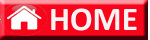
<style>
.page{position:relative;width:150px;height:40px;background:#f8051c}
.page>*{position:absolute;margin:0}
.t1{font:33.3px "Calibri-Bold";color:#f9f2f3}
</style>
<div class="page">
<p class="t1" style="left:51px;top:8px;width:86px;height:23px">HOME</p>
</div>
